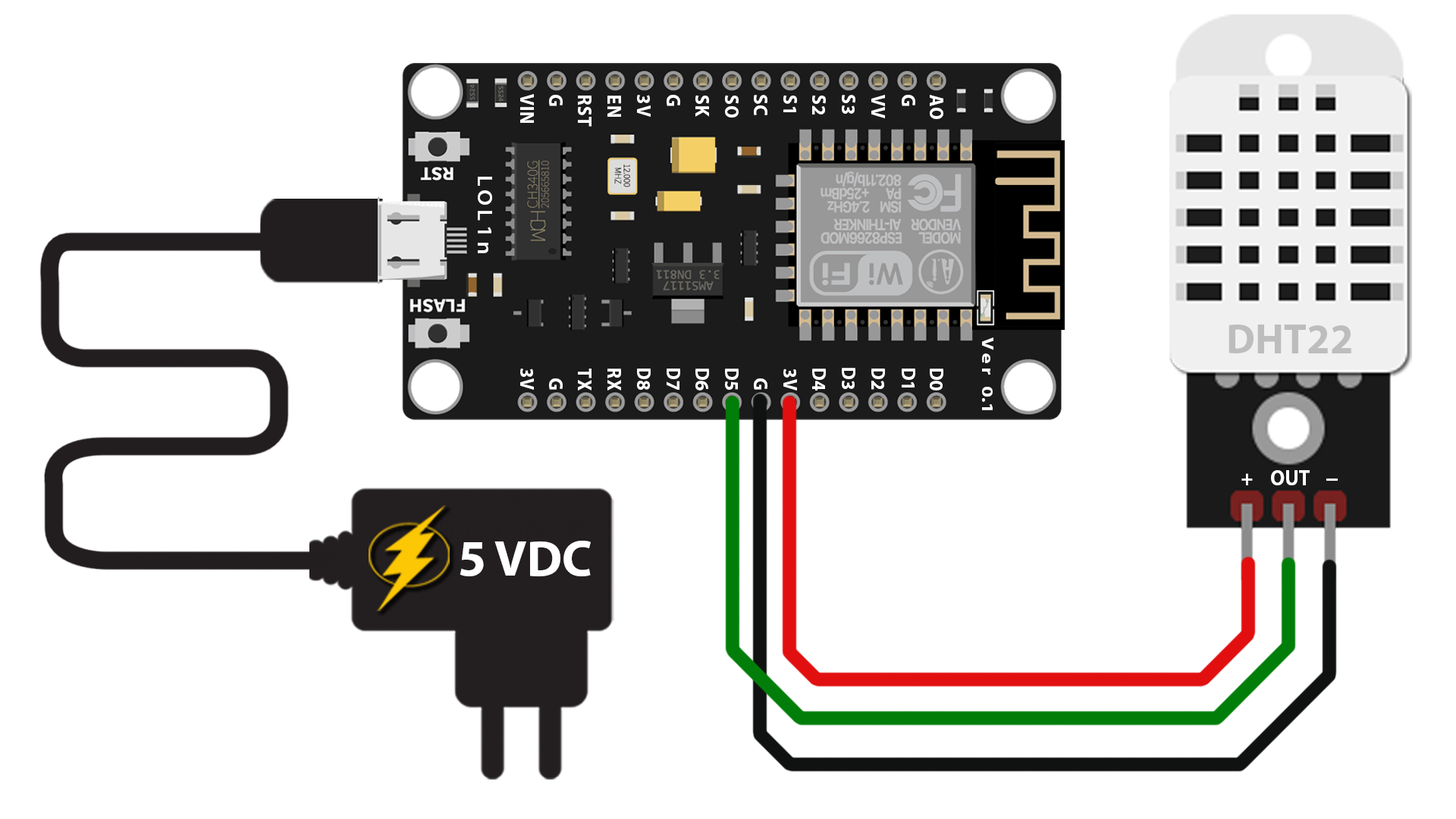
<style>
.page{position:relative;width:1456px;height:819px;background:#ffffff}
.page>*{position:absolute;margin:0}
.t1{font:19.5px "MyriadPro-Bold";letter-spacing:0.02em;color:#ffffff;scale:0.94 1}
.t2{font:72.4px "MyriadPro-Bold";color:#bdbdbd}
.t3{font:37px "MyriadPro-Bold";color:#ffffff;scale:0.95 1}
.t4{font:50.9px "MyriadPro-Bold";color:#ffffff}
</style>
<div class="page">
<p class="t1" style="left:520px;top:94px;width:14px;height:29px;rotate:90deg">VIN</p>
<p class="t1" style="left:549px;top:95px;width:14px;height:11px;rotate:90deg">G</p>
<p class="t1" style="left:578px;top:96px;width:13px;height:31px;rotate:90deg">RST</p>
<p class="t1" style="left:607px;top:96px;width:14px;height:21px;rotate:90deg">EN</p>
<p class="t1" style="left:637px;top:95px;width:14px;height:22px;rotate:90deg">3V</p>
<p class="t1" style="left:667px;top:95px;width:13px;height:11px;rotate:90deg">G</p>
<p class="t1" style="left:695px;top:95px;width:14px;height:22px;rotate:90deg">SK</p>
<p class="t1" style="left:725px;top:95px;width:14px;height:23px;rotate:90deg">SO</p>
<p class="t1" style="left:754px;top:95px;width:13px;height:20px;rotate:90deg">SC</p>
<p class="t1" style="left:783px;top:95px;width:14px;height:17px;rotate:90deg">S1</p>
<p class="t1" style="left:812px;top:95px;width:14px;height:20px;rotate:90deg">S2</p>
<p class="t1" style="left:842px;top:95px;width:13px;height:19px;rotate:90deg">S3</p>
<p class="t1" style="left:871px;top:95px;width:14px;height:23px;rotate:90deg">VV</p>
<p class="t1" style="left:902px;top:95px;width:13px;height:11px;rotate:90deg">G</p>
<p class="t1" style="left:930px;top:95px;width:13px;height:24px;rotate:90deg">AO</p>
<p class="t2" style="left:1228px;top:325px;width:123px;height:28px">DHT22</p>
<p class="t1" style="left:520px;top:369px;width:14px;height:21px;rotate:90deg">3V</p>
<p class="t1" style="left:578px;top:369px;width:13px;height:22px;rotate:90deg">TX</p>
<p class="t1" style="left:607px;top:369px;width:14px;height:22px;rotate:90deg">RX</p>
<p class="t1" style="left:637px;top:369px;width:14px;height:21px;rotate:90deg">D8</p>
<p class="t1" style="left:667px;top:369px;width:13px;height:21px;rotate:90deg">D7</p>
<p class="t1" style="left:695px;top:369px;width:14px;height:22px;rotate:90deg">D6</p>
<p class="t1" style="left:725px;top:369px;width:14px;height:21px;rotate:90deg">D5</p>
<p class="t1" style="left:783px;top:369px;width:14px;height:22px;rotate:90deg">3V</p>
<p class="t1" style="left:812px;top:369px;width:14px;height:22px;rotate:90deg">D4</p>
<p class="t1" style="left:842px;top:368px;width:13px;height:21px;rotate:90deg">D3</p>
<p class="t1" style="left:871px;top:369px;width:14px;height:21px;rotate:90deg">D2</p>
<p class="t1" style="left:902px;top:369px;width:13px;height:19px;rotate:90deg">D1</p>
<p class="t1" style="left:930px;top:369px;width:13px;height:22px;rotate:90deg">D0</p>
<p class="t1" style="left:549px;top:378px;width:14px;height:12px;rotate:90deg">G</p>
<p class="t1" style="left:754px;top:378px;width:13px;height:12px;rotate:90deg">G</p>
<p class="t3" style="left:1241px;top:473px;width:12px;height:12px">+</p>
<p class="t3" style="left:1271px;top:470px;width:39px;height:15px">OUT</p>
<p class="t4" style="left:460px;top:541px;width:131px;height:35px">5 VDC</p>
</div>
